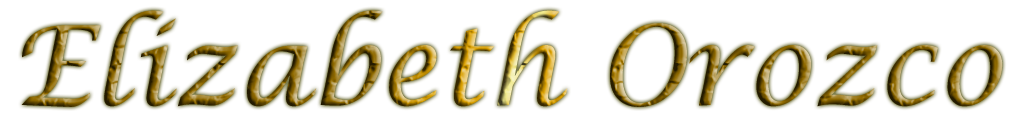
<style>
.page{position:relative;width:1015px;height:130px;background:#ffffff}
.page>*{position:absolute;margin:0}
.t1{font:110px "LucidaCalligraphy-Italic"}
</style>
<div class="page">
<p class="t1" style="left:21px;top:10px;width:982px;height:97px">Elizabeth Orozco</p>
</div>
